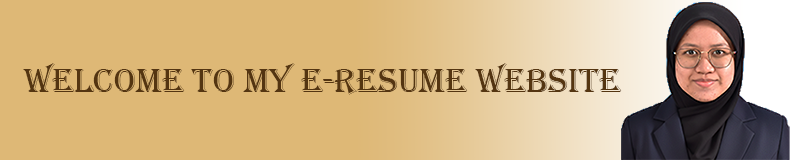
<style>
.page{position:relative;width:800px;height:160px;background:#deb876}
.page>*{position:absolute;margin:0}
.t1{font:35.3px "Algerian";color:#543511}
</style>
<div class="page">
<p class="t1" style="left:23px;top:63px;width:599px;height:32px">WELCOME TO MY E-RESUME WEBSITE</p>
</div>
